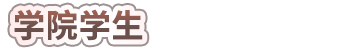
<style>
.page{position:relative;width:360px;height:50px;background:#ffffff}
.page>*{position:absolute;margin:0}
.t1{font:32px "SourceHanSansSC-Bold";font-weight:bold}
</style>
<div class="page">
<p class="t1" style="left:14px;top:9px;width:129px;height:32px">学院学生</p>
</div>
